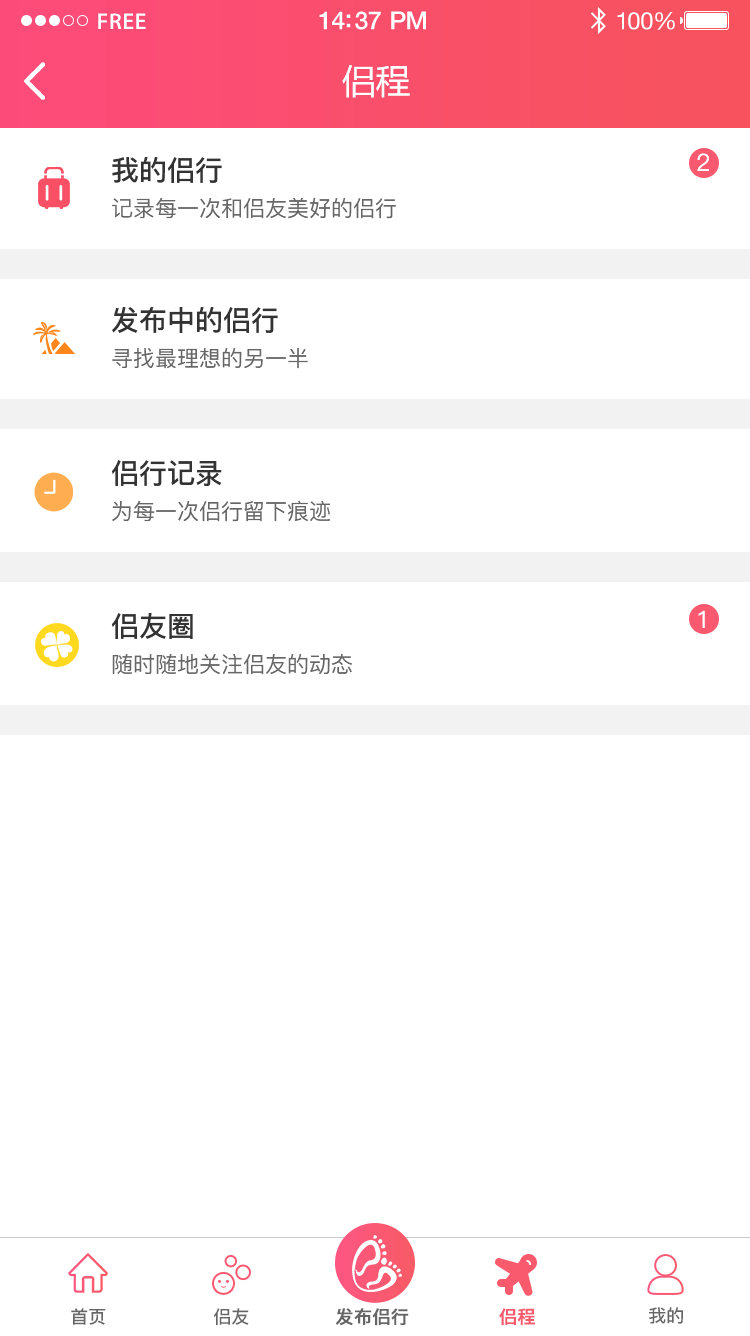
<style>
.page{position:relative;width:750px;height:1336px;background:#ffffff}
.page>*{position:absolute;margin:0}
.t1{font:23px "MyriadPro-Semibold";letter-spacing:0.02em;color:#ffffff}
.t2{font:25px "HelveticaNeue-Medium";letter-spacing:-0.02em;color:#ffffff}
.t3{font:24px "HelveticaNeue";letter-spacing:-0.02em;color:#ffffff}
.t4{font:34px "MicrosoftYaHei";color:#ffffff;text-transform:uppercase}
.t5{font:28px "PingFang-SC-Bold";color:#333333;text-transform:uppercase}
.t6{font:24px "PingFang-SC-Medium";color:#ffffff;text-transform:uppercase}
.t7{font:22px "PingFang-SC-Medium";color:#666666;text-transform:uppercase}
.t8{font:18px "PingFang-SC-Bold";color:#666666}
.t9{font:18px "PingFang-SC-Bold";color:#666666;font-weight:bold}
.t10{font:18px "PingFang-SC-Bold";color:#f95a6c;font-weight:bold}
</style>
<div class="page">
<p class="t1" style="left:98px;top:13px;width:48px;height:16px">FREE</p>
<p class="t2" style="left:319px;top:11px;width:107px;height:19px">14:37 PM</p>
<p class="t3" style="left:617px;top:12px;width:58px;height:18px">100%</p>
<p class="t4" style="left:342px;top:65px;width:68px;height:33px">侣程</p>
<p class="t5" style="left:112px;top:157px;width:110px;height:26px">我的侣行</p>
<p class="t6" style="left:697px;top:153px;width:12px;height:18px">2</p>
<p class="t7" style="left:112px;top:197px;width:284px;height:22px">记录每一次和侣友美好的侣行</p>
<p class="t5" style="left:112px;top:307px;width:166px;height:26px">发布中的侣行</p>
<p class="t7" style="left:112px;top:348px;width:196px;height:21px">寻找最理想的另一半</p>
<p class="t5" style="left:111px;top:460px;width:111px;height:26px">侣行记录</p>
<p class="t7" style="left:112px;top:500px;width:218px;height:22px">为每一次侣行留下痕迹</p>
<p class="t5" style="left:111px;top:613px;width:82px;height:26px">侣友圈</p>
<p class="t6" style="left:698px;top:610px;width:7px;height:18px">1</p>
<p class="t7" style="left:112px;top:653px;width:240px;height:22px">随时随地关注侣友的动态</p>
<p class="t8" style="left:71px;top:1308px;width:35px;height:17px">首页</p>
<p class="t8" style="left:213px;top:1308px;width:36px;height:17px">侣友</p>
<p class="t9" style="left:336px;top:1308px;width:73px;height:18px">发布侣行</p>
<p class="t10" style="left:499px;top:1308px;width:36px;height:18px">侣程</p>
<p class="t8" style="left:649px;top:1307px;width:34px;height:17px">我的</p>
</div>
